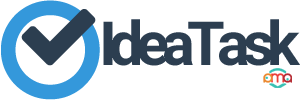
<style>
.page{position:relative;width:300px;height:100px;background:#ffffff}
.page>*{position:absolute;margin:0}
.t1{font:61px "Roboto-Bold";letter-spacing:-0.12em;color:#2c3e50}
</style>
<div class="page">
<p class="t1" style="left:103px;top:19px;width:198px;height:47px">IdeaTask</p>
</div>
